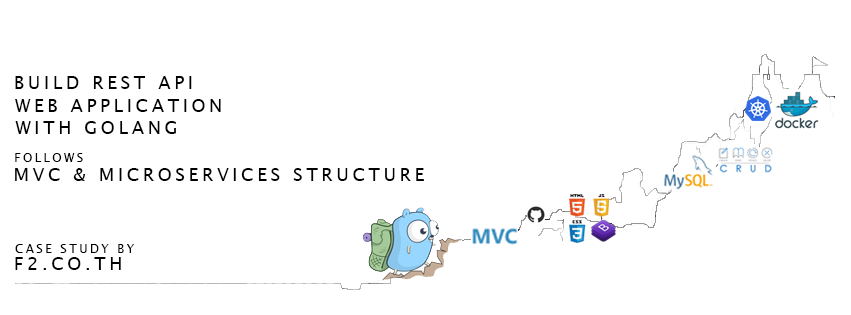
<style>
.page{position:relative;width:851px;height:315px;background:#ffffff}
.page>*{position:absolute;margin:0}
.t1{font:18px "LucidaGrande";letter-spacing:0.2em;color:#000000;text-transform:uppercase}
.t2{font:12px "LucidaGrande";letter-spacing:0.2em;color:#000000;text-transform:uppercase}
.t3{font:14px "LucidaGrande";letter-spacing:0.2em;color:#000000;text-transform:uppercase}
</style>
<div class="page">
<p class="t1" style="left:15px;top:76px;width:177px;height:13px">build rest api</p>
<p class="t1" style="left:15px;top:99px;width:206px;height:13px">web application</p>
<p class="t1" style="left:15px;top:121px;width:161px;height:13px">with golang</p>
<p class="t2" style="left:15px;top:153px;width:68px;height:9px">follows</p>
<p class="t1" style="left:15px;top:168px;width:409px;height:13px">mvC &amp; microservices structure</p>
<p class="t2" style="left:15px;top:244px;width:119px;height:9px">case study by<span class="t3"></span></p>
<p class="t1" style="left:15px;top:257px;width:106px;height:13px">f2.co.th</p>
</div>
